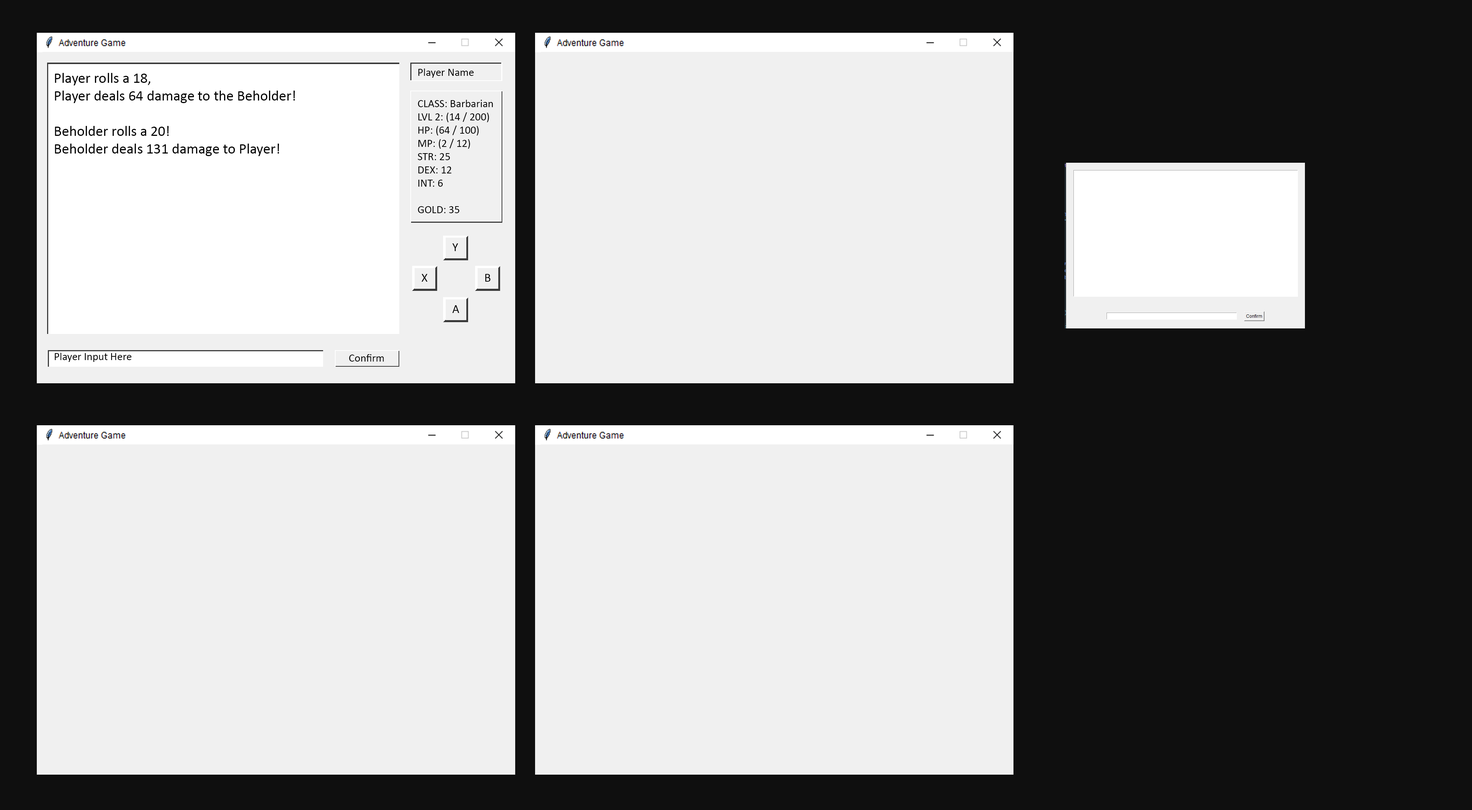
<style>
.page{position:relative;width:1472px;height:810px;background:#f0f0f0}
.page>*{position:absolute;margin:0}
.t1{font:14.7px "Calibri";color:#000000}
.t2{font:11px "Calibri";color:#000000}
.t3{font:12.2px "Calibri";color:#000000}
</style>
<div class="page">
<p class="t1" style="left:55px;top:73px;width:240px;height:83px">Player rolls a 18,<br>Player deals 64 damage to the Beholder!<br><br>Beholder rolls a 20!<br>Beholder deals 131 damage to Player!</p>
<p class="t2" style="left:419px;top:68px;width:55px;height:10px">Player Name</p>
<p class="t2" style="left:418px;top:100px;width:75px;height:113px">CLASS: Barbarian<br>LVL 2: (14 / 200) <br>HP: (64 / 100)<br>MP: (2 / 12)<br>STR: 25<br>DEX: 12<br>INT: 6<br><br>GOLD: 35</p>
<p class="t3" style="left:452px;top:243px;width:6px;height:8px">Y</p>
<p class="t3" style="left:421px;top:274px;width:7px;height:8px">X</p>
<p class="t3" style="left:485px;top:274px;width:6px;height:8px">B</p>
<p class="t3" style="left:452px;top:305px;width:7px;height:8px">A</p>
<p class="t2" style="left:55px;top:353px;width:76px;height:9px">Player Input Here</p>
<p class="t2" style="left:349px;top:354px;width:35px;height:7px">Confirm</p>
</div>
